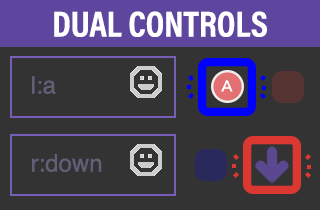
<style>
.page{position:relative;width:320px;height:210px;background:#333333}
.page>*{position:absolute;margin:0}
.t1{font:36.3px "AcuminProCond-Bold";color:#ffffff;text-transform:uppercase}
.t2{font:24px "Helvetica";color:#645f78}
.t3{font:15.8px "Avenir-Medium";color:#ffffff}
</style>
<div class="page">
<p class="t1" style="left:54px;top:11px;width:213px;height:26px">Dual Controls</p>
<p class="t2" style="left:32px;top:76px;width:24px;height:18px">l:a</p>
<p class="t3" style="left:221px;top:80px;width:12px;height:12px">A</p>
<p class="t2" style="left:32px;top:154px;width:70px;height:18px">r:down</p>
</div>
